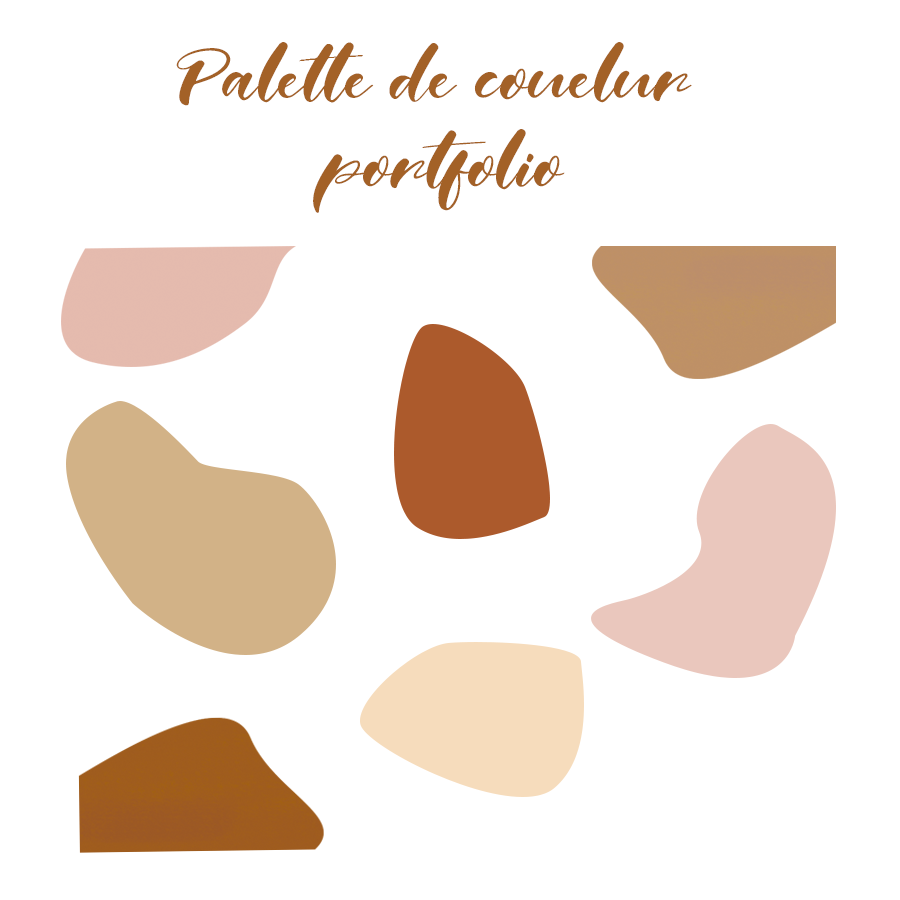
<style>
.page{position:relative;width:900px;height:900px;background:#ffffff}
.page>*{position:absolute;margin:0}
.t1{font:72px "Real-Miami";color:#a36127}
</style>
<div class="page">
<p class="t1" style="left:176px;top:42px;width:516px;height:171px;text-align:center">Palette de couelur <br>portfolio</p>
</div>
